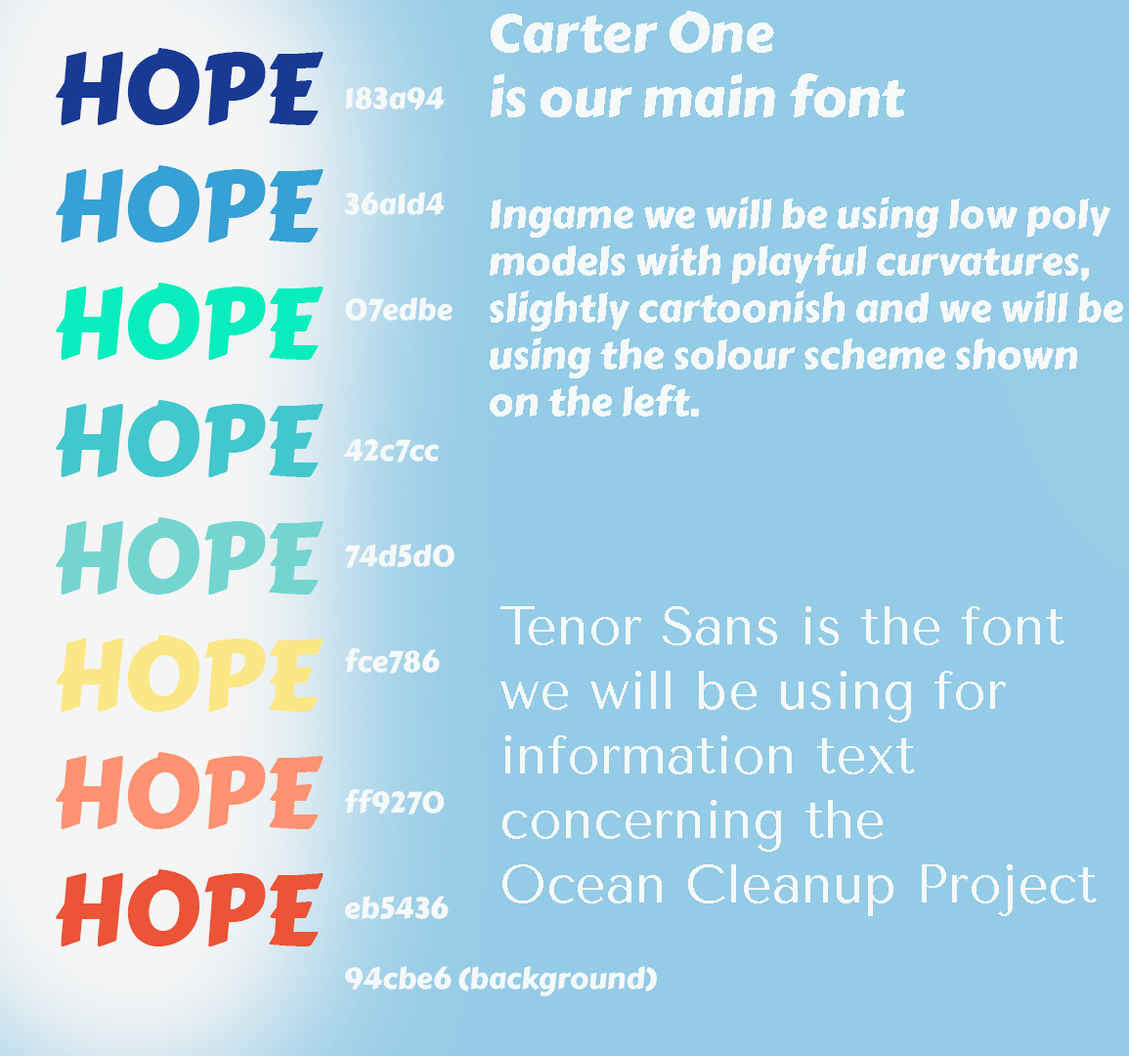
<style>
.page{position:relative;width:1129px;height:1056px;background:#94cbe6}
.page>*{position:absolute;margin:0}
.t1{font:39.1px "CarterOne";color:#f5f9f9}
.t2{font:53.8px "CarterOne";color:#f5f9f9}
.t3{font:97.8px "CarterOne";color:#183a94}
.t4{font:97.8px "CarterOne";color:#36a1d4}
.t5{font:97.8px "CarterOne";color:#07edbe}
.t6{font:97.8px "CarterOne";color:#42c7cc}
.t7{font:97.8px "CarterOne";color:#74d5d0}
.t8{font:97.8px "CarterOne";color:#fce786}
.t9{font:97.8px "CarterOne";color:#ff9270}
.t10{font:97.8px "CarterOne";color:#eb5436}
.t11{font:29.3px "CarterOne";color:#f5f9f9}
.t12{font:53.8px "TenorSans";color:#f5f9f9}
</style>
<div class="page">
<p class="t1" style="left:490px;top:11px;width:633px;height:406px"><span class="t2">Carter One <br>is our main font<br><br></span>Ingame we will be using low poly models with playful curvatures, slightly cartoonish and we will be using the solour scheme shown on the left.</p>
<p class="t3" style="left:56px;top:48px;width:268px;height:898px">HOPE<br><span class="t4">HOPE<br></span><span class="t5">HOPE<br></span><span class="t6">HOPE<br></span><span class="t7">HOPE<br></span><span class="t8">HOPE<br></span><span class="t9">HOPE<br></span><span class="t10">HOPE</span></p>
<p class="t11" style="left:343px;top:86px;width:314px;height:910px">183a94<br><br><br>36a1d4<br><br><br>07edbe<br><br><br><br>42c7cc<br><br><br>74d5d0<br><br><br>fce786<br><br><br><br>ff9270<br><br><br>eb5436<br><br>94cbe6 (background)</p>
<p class="t12" style="left:501px;top:606px;width:596px;height:310px">Tenor Sans is the font<br>we will be using for<br>information text<br>concerning the<br>Ocean Cleanup Project</p>
</div>
